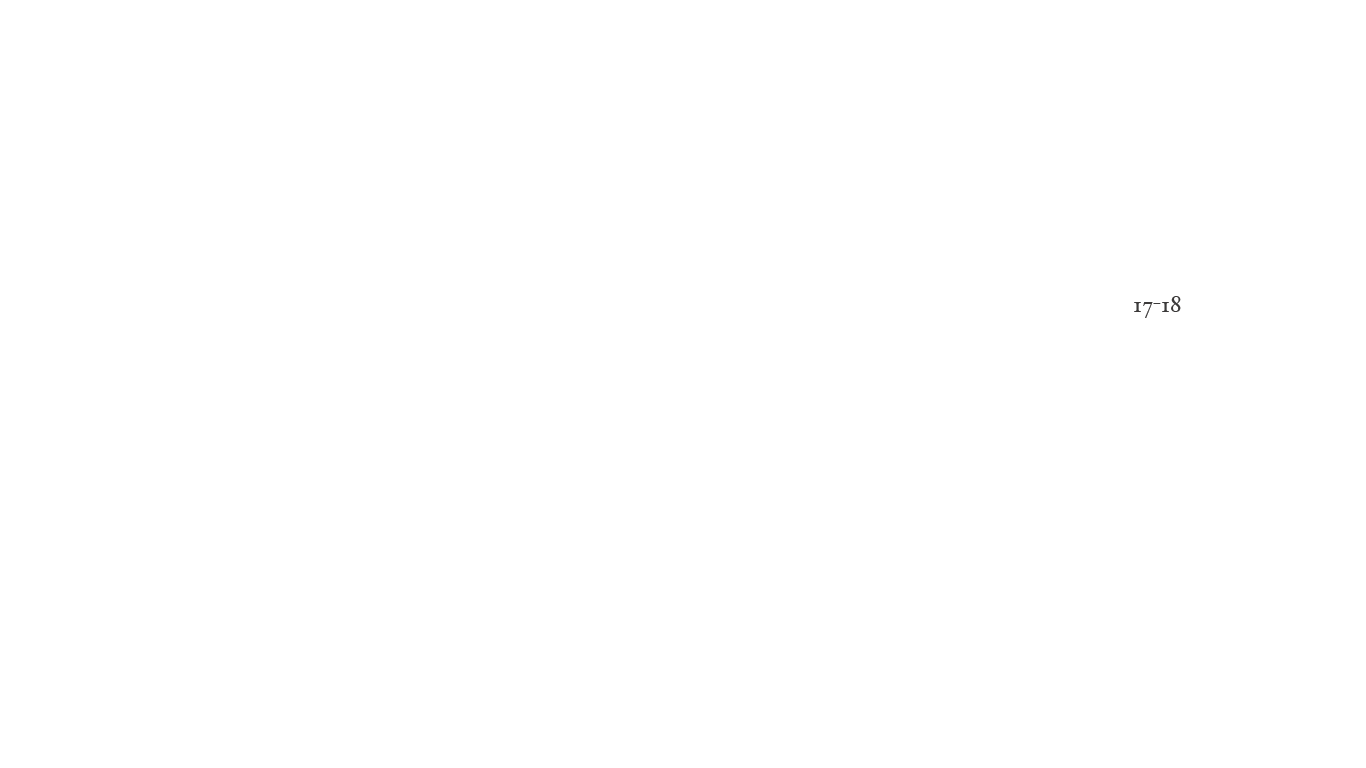
<style>
.page{position:relative;width:1366px;height:768px;background:#ffffff}
.page>*{position:absolute;margin:0}
.t1{font:24px "HoeflerText-Regular";color:#3c3a3a}
</style>
<div class="page">
<p class="t1" style="left:1134px;top:296px;width:47px;height:22px">17-18</p>
</div>
